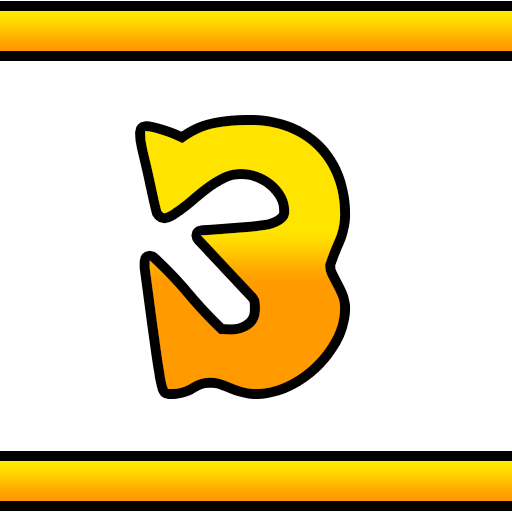
<style>
.page{position:relative;width:512px;height:512px;background:#ffffff}
.page>*{position:absolute;margin:0}
.t1{font:514.1px "Crash-a-Like";letter-spacing:0.1em}
</style>
<div class="page">
<p class="t1" style="left:145px;top:124px;width:196px;height:265px">3</p>
</div>
